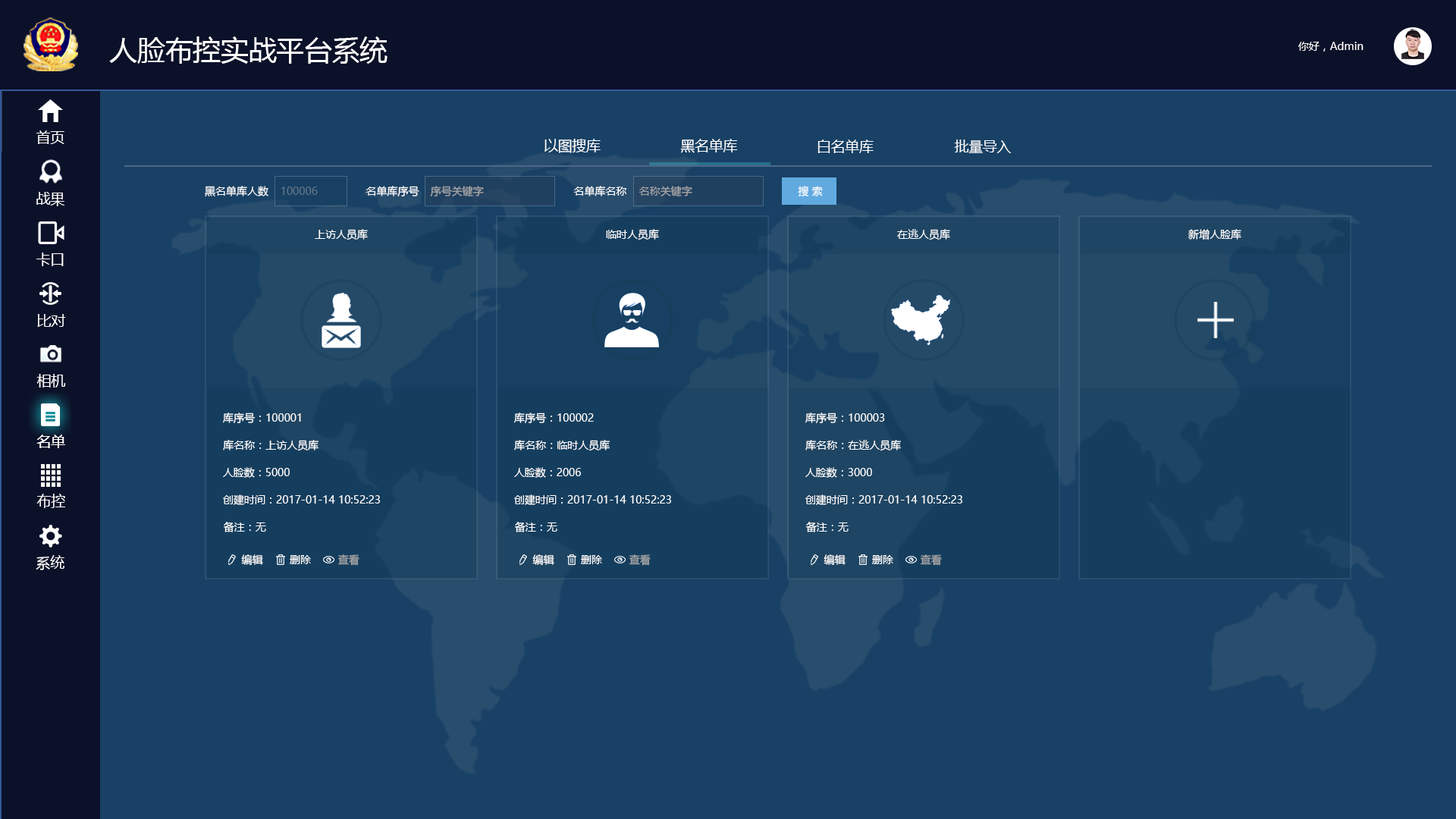
<style>
.page{position:relative;width:1456px;height:819px;background:#184165}
.page>*{position:absolute;margin:0}
.t1{font:10.6px "MicrosoftYaHei";color:#ffffff}
.t2{font:14.2px "MicrosoftYaHei";color:#ffffff}
.t3{font:10.6px "MicrosoftYaHei";color:#a9a9a9}
.t4{font:10.6px "MicrosoftYaHei";color:#607485}
</style>
<div class="page">
<p class="t1" style="left:1298px;top:42px;width:65px;height:10px">你好，Admin</p>
<p class="t2" style="left:544px;top:139px;width:57px;height:14px">以图搜库</p>
<p class="t2" style="left:680px;top:139px;width:58px;height:14px">黑名单库</p>
<p class="t2" style="left:817px;top:140px;width:57px;height:13px">白名单库</p>
<p class="t2" style="left:954px;top:140px;width:58px;height:13px">批量导入</p>
<p class="t1" style="left:205px;top:186px;width:63px;height:10px">黑名单库人数</p>
<p class="t1" style="left:366px;top:186px;width:53px;height:10px">名单库序号</p>
<p class="t3" style="left:430px;top:186px;width:54px;height:10px">序号关键字</p>
<p class="t1" style="left:573px;top:186px;width:54px;height:10px">名单库名称</p>
<p class="t3" style="left:639px;top:186px;width:53px;height:10px">名称关键字</p>
<p class="t1" style="left:798px;top:186px;width:25px;height:10px">搜 索</p>
<p class="t4" style="left:281px;top:187px;width:37px;height:8px">100006</p>
<p class="t1" style="left:315px;top:229px;width:53px;height:11px">上访人员库</p>
<p class="t1" style="left:606px;top:229px;width:53px;height:11px">临时人员库</p>
<p class="t1" style="left:897px;top:229px;width:53px;height:11px">在逃人员库</p>
<p class="t1" style="left:1188px;top:229px;width:53px;height:11px">新增人脸库</p>
<p class="t1" style="left:223px;top:413px;width:78px;height:10px">库序号：100001</p>
<p class="t1" style="left:514px;top:413px;width:80px;height:10px">库序号：100002</p>
<p class="t1" style="left:805px;top:413px;width:80px;height:10px">库序号：100003</p>
<p class="t1" style="left:223px;top:440px;width:95px;height:11px">库名称：上访人员库</p>
<p class="t1" style="left:514px;top:440px;width:96px;height:11px">库名称：临时人员库</p>
<p class="t1" style="left:805px;top:440px;width:96px;height:11px">库名称：在逃人员库</p>
<p class="t1" style="left:223px;top:467px;width:67px;height:11px">人脸数：5000</p>
<p class="t1" style="left:514px;top:467px;width:67px;height:11px">人脸数：2006</p>
<p class="t1" style="left:805px;top:467px;width:67px;height:11px">人脸数：3000</p>
<p class="t1" style="left:223px;top:494px;width:157px;height:11px">创建时间：2017-01-14 10:52:23</p>
<p class="t1" style="left:514px;top:494px;width:157px;height:11px">创建时间：2017-01-14 10:52:23</p>
<p class="t1" style="left:805px;top:494px;width:157px;height:11px">创建时间：2017-01-14 10:52:23</p>
<p class="t1" style="left:224px;top:522px;width:42px;height:10px">备注：无</p>
<p class="t1" style="left:515px;top:522px;width:42px;height:10px">备注：无</p>
<p class="t1" style="left:806px;top:522px;width:43px;height:10px">备注：无</p>
<p class="t1" style="left:241px;top:554px;width:22px;height:11px">编辑</p>
<p class="t1" style="left:290px;top:555px;width:21px;height:9px">删除</p>
<p class="t3" style="left:338px;top:554px;width:21px;height:12px">查看</p>
<p class="t1" style="left:532px;top:554px;width:22px;height:11px">编辑</p>
<p class="t1" style="left:581px;top:555px;width:21px;height:9px">删除</p>
<p class="t3" style="left:629px;top:554px;width:22px;height:12px">查看</p>
<p class="t1" style="left:824px;top:554px;width:22px;height:11px">编辑</p>
<p class="t1" style="left:872px;top:555px;width:21px;height:9px">删除</p>
<p class="t3" style="left:921px;top:554px;width:21px;height:12px">查看</p>
</div>
